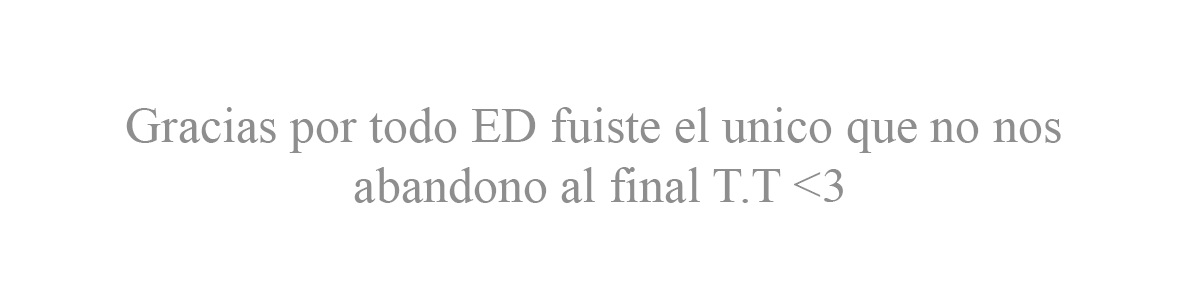
<style>
.page{position:relative;width:1200px;height:300px;background:#ffffff}
.page>*{position:absolute;margin:0}
.t1{font:12px "TimesNewRomanPSMT";color:#8e8e8e}
</style>
<div class="page">
<p class="t1" style="left:126px;top:107px;width:935px;height:96px;text-align:center">Gracias por todo ED fuiste el unico que no nos <br>abandono al final T.T &lt;3</p>
</div>
